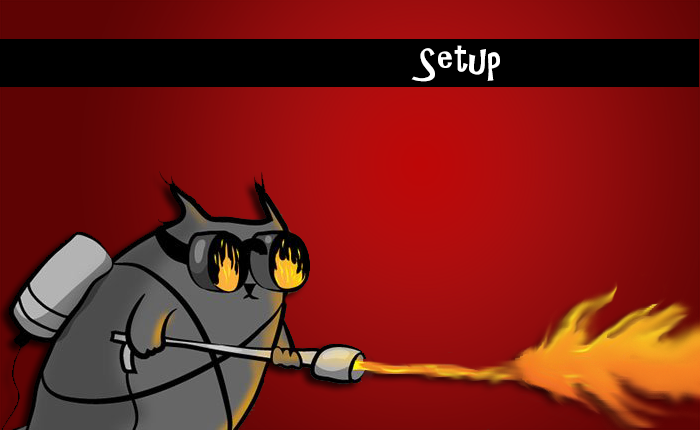
<style>
.page{position:relative;width:700px;height:430px}
.page>*{position:absolute;margin:0}
.t1{font:36px "ARCHRISTY";color:#ffffff}
</style>
<div class="page">
<p class="t1" style="left:411px;top:45px;width:89px;height:37px">Setup</p>
</div>
